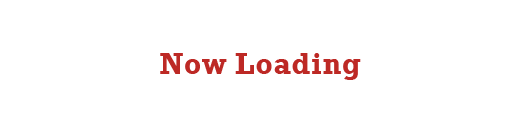
<style>
.page{position:relative;width:520px;height:120px;background:#ffffff}
.page>*{position:absolute;margin:0}
.t1{font:30px "Rockwell-Bold";letter-spacing:0.025em;color:#bd2925}
</style>
<div class="page">
<p class="t1" style="left:160px;top:53px;width:201px;height:27px">Now Loading</p>
</div>
